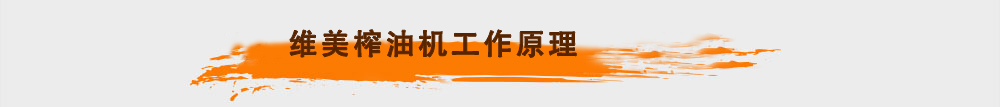
<style>
.page{position:relative;width:1000px;height:107px;background:#ececec}
.page>*{position:absolute;margin:0}
.t1{font:29.2px "AdobeHeitiStd-Regular";letter-spacing:0.1em;color:#582400}
</style>
<div class="page">
<p class="t1" style="left:290px;top:29px;width:287px;height:29px">维美榨油机工作原理</p>
</div>
